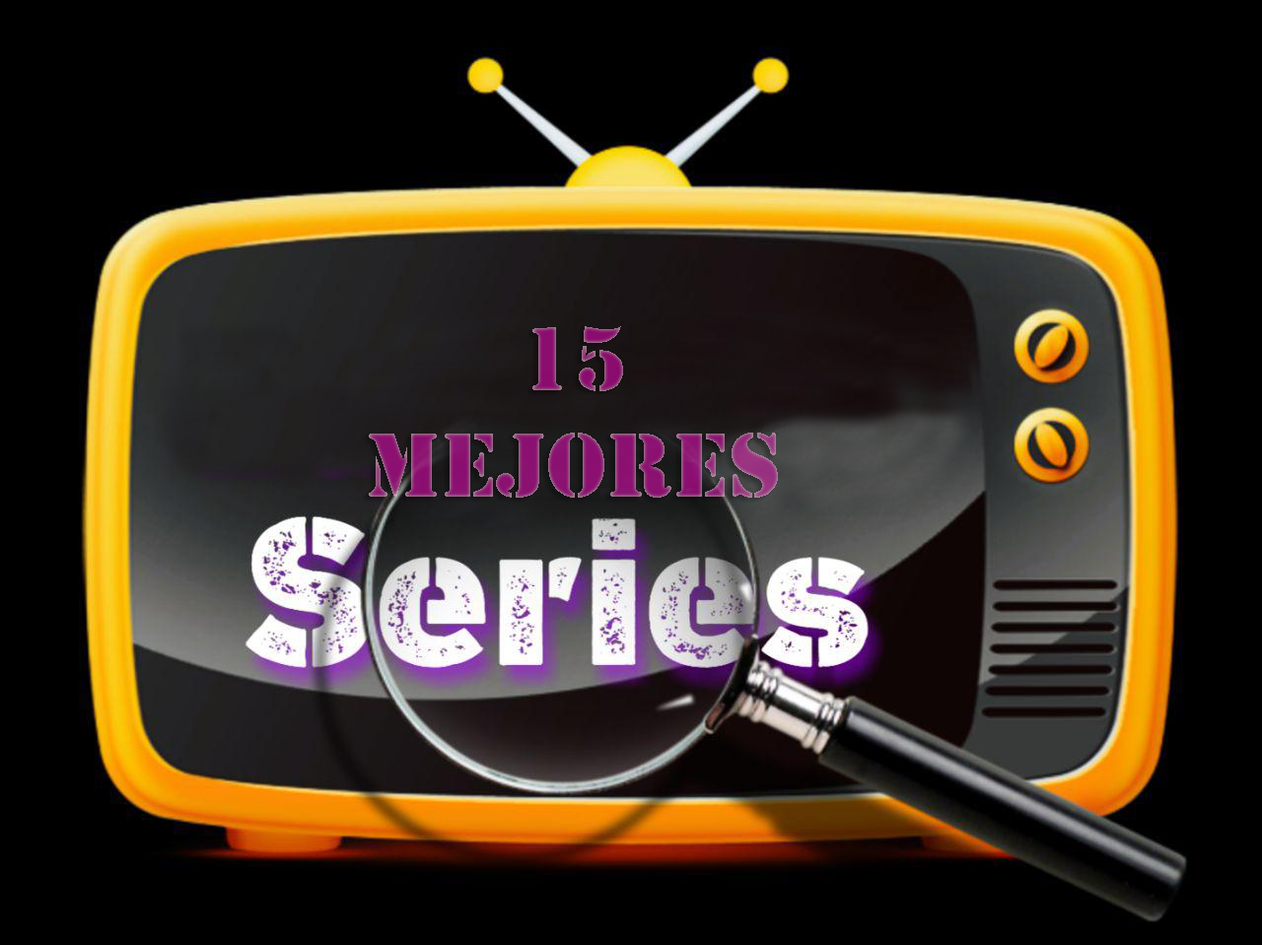
<style>
.page{position:relative;width:1262px;height:945px;background:#000000}
.page>*{position:absolute;margin:0}
.t1{font:94.6px "Stencil"}
</style>
<div class="page">
<p class="t1" style="left:369px;top:326px;width:409px;height:172px;text-align:center">15<br>MEJORES</p>
</div>
